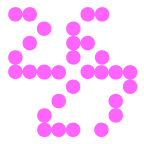
<style>
.page{position:relative;width:144px;height:144px;background:#ffffff}
.page>*{position:absolute;margin:0}
.t1{font:143.7px/57.9px "TINY5x3-100";color:#ff64ff}
</style>
<div class="page">
<p class="t1" style="left:8px;top:7px;width:130px;height:130px;text-align:center">26<br>  27</p>
</div>
